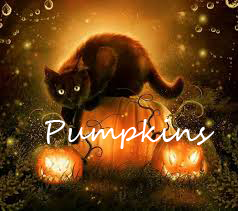
<style>
.page{position:relative;width:238px;height:211px}
.page>*{position:absolute;margin:0}
.t1{font:30px "SegoeScript";color:#fffefe}
</style>
<div class="page">
<p class="t1" style="left:45px;top:119px;width:170px;height:30px">Pumpkins</p>
</div>
